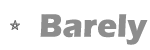
<style>
.page{position:relative;width:150px;height:50px;background:#ffffff}
.page>*{position:absolute;margin:0}
.t1{font:33.3px "ErasITC-Bold";color:#8d8d8d}
</style>
<div class="page">
<p class="t1" style="left:40px;top:14px;width:108px;height:31px">Barely</p>
</div>
